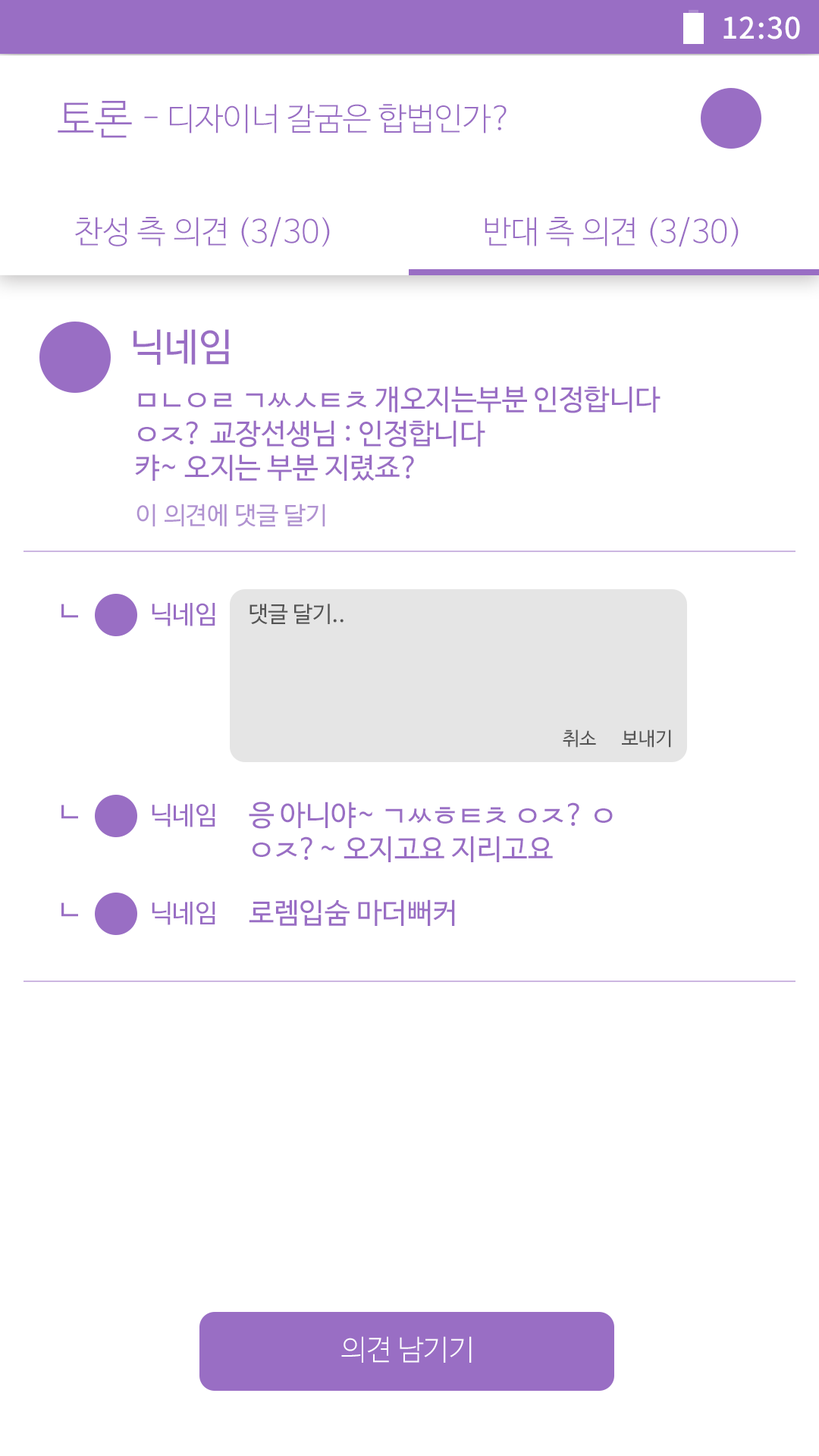
<style>
.page{position:relative;width:819px;height:1456px;background:#ffffff}
.page>*{position:absolute;margin:0}
.t1{font:29.6px "NotoSansCJKkr-Medium";letter-spacing:0.029em;color:#ffffff}
.t2{font:42.3px "NanumBarunGothicLight";color:#996ec4}
.t3{font:31.6px "NanumBarunGothicLight";color:#996ec4}
.t4{font:38.3px "NanumBarunGothic";color:#996ec4}
.t5{font:28.4px "NanumBarunGothic";color:#996ec4}
.t6{font:24.6px "NanumBarunGothic";color:#b092d1}
.t7{font:25.3px "NanumBarunGothic";color:#996ec4}
.t8{font:22.1px "NanumBarunGothic";color:#545454}
.t9{font:19px "NanumBarunGothic";color:#545454}
.t10{font:28.6px "NanumBarunGothicLight";color:#ffffff}
</style>
<div class="page">
<p class="t1" style="left:723px;top:16px;width:77px;height:23px">12:30</p>
<p class="t2" style="left:58px;top:101px;width:74px;height:37px">토론</p>
<p class="t3" style="left:144px;top:104px;width:363px;height:29px">- 디자이너 갈굼은 합법인가?</p>
<p class="t3" style="left:75px;top:217px;width:255px;height:30px">찬성 측 의견 (3/30)</p>
<p class="t3" style="left:485px;top:217px;width:254px;height:30px">반대 측 의견 (3/30)</p>
<p class="t4" style="left:133px;top:329px;width:96px;height:36px">닉네임</p>
<p class="t5" style="left:135px;top:386px;width:525px;height:95px">ㅁㄴㅇㄹ ㄱㅆㅅㅌㅊ 개오지는부분 인정합니다 ㅇㅈ? 교장선생님 : 인정합니다 <br>캬~ 오지는 부분 지렸죠?</p>
<p class="t6" style="left:136px;top:504px;width:189px;height:23px">이 의견에 댓글 달기</p>
<p class="t5" style="left:61px;top:604px;width:17px;height:14px">ㄴ</p>
<p class="t7" style="left:152px;top:603px;width:63px;height:23px">닉네임</p>
<p class="t8" style="left:249px;top:604px;width:95px;height:20px">댓글 달기..</p>
<p class="t9" style="left:563px;top:730px;width:108px;height:18px">취소      보내기</p>
<p class="t5" style="left:61px;top:805px;width:17px;height:14px">ㄴ</p>
<p class="t7" style="left:152px;top:804px;width:63px;height:23px">닉네임</p>
<p class="t5" style="left:249px;top:802px;width:364px;height:60px">응 아니야~ ㄱㅆㅎㅌㅊ ㅇㅈ? ㅇ ㅇㅈ?~ 오지고요 지리고요</p>
<p class="t5" style="left:61px;top:902px;width:17px;height:15px">ㄴ</p>
<p class="t7" style="left:152px;top:902px;width:63px;height:23px">닉네임</p>
<p class="t5" style="left:249px;top:899px;width:206px;height:27px">로렘입숨 마더뻐커</p>
<p class="t10" style="left:341px;top:1336px;width:131px;height:27px">의견 남기기</p>
</div>
